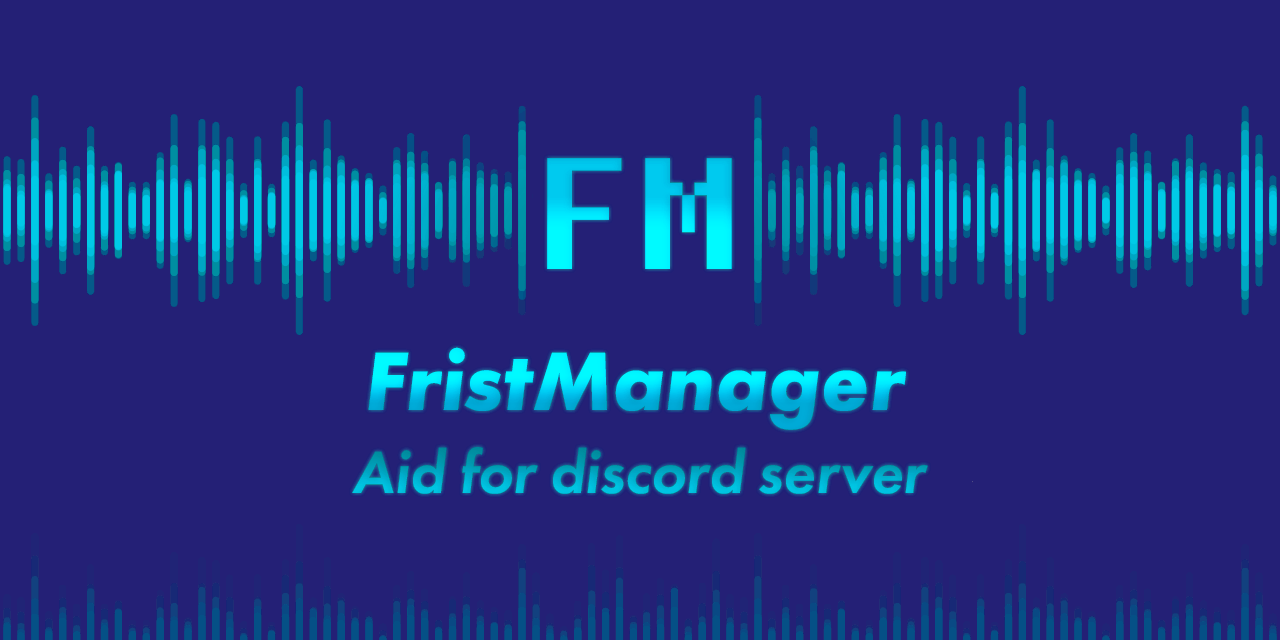
<style>
.page{position:relative;width:1280px;height:640px;background:#242076}
.page>*{position:absolute;margin:0}
.t1{font:197px "FixedsysExcelsiorIIIb"}
.t2{font:86px "FuturaPT-BoldObl"}
.t3{font:62px "FuturaPT-DemiObl";color:#00afce}
</style>
<div class="page">
<p class="t1" style="left:547px;top:158px;width:185px;height:111px">FM</p>
<p class="t2" style="left:368px;top:347px;width:538px;height:83px">FristManager</p>
<p class="t3" style="left:352px;top:447px;width:576px;height:47px">Aid for discord server</p>
</div>
